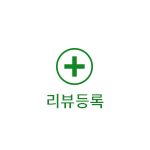
<style>
.page{position:relative;width:150px;height:150px;background:#ffffff}
.page>*{position:absolute;margin:0}
.t1{font:16px "NotoSansKR-Medium";letter-spacing:-0.005em;color:#138723}
</style>
<div class="page">
<p class="t1" style="left:47px;top:93px;width:57px;height:16px">리뷰등록</p>
</div>
